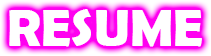
<style>
.page{position:relative;width:211px;height:56px;background:#ffffff}
.page>*{position:absolute;margin:0}
.t1{font:53.3px "BerlinSansFBDemi-Bold";color:#ffffff}
</style>
<div class="page">
<p class="t1" style="left:9px;top:9px;width:193px;height:38px">RESUME</p>
</div>
